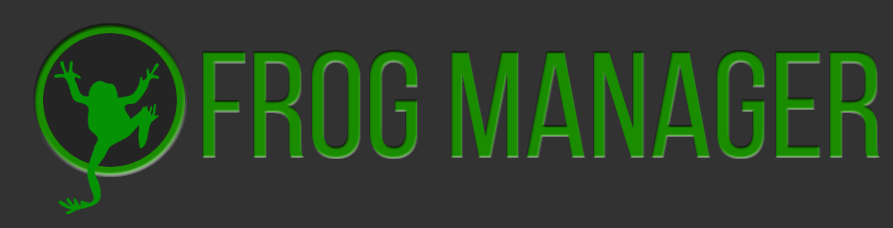
<style>
.page{position:relative;width:893px;height:228px;background:#323232}
.page>*{position:absolute;margin:0}
.t1{font:150px "BebasNeueRegular";color:#1a8c00}
</style>
<div class="page">
<p class="t1" style="left:203px;top:51px;width:677px;height:107px">FROG MANAGER</p>
</div>
